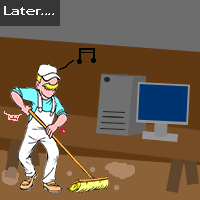
<style>
.page{position:relative;width:200px;height:200px;background:#603913}
.page>*{position:absolute;margin:0}
.t1{font:12px "MyriadPro-Regular";color:#f5f5f5;scale:1.5 1}
</style>
<div class="page">
<p class="t1" style="left:4px;top:6px;width:50px;height:9px">Later....</p>
</div>
